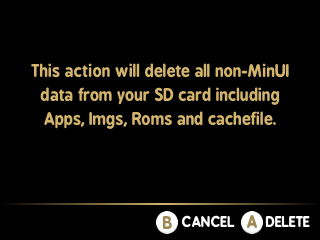
<style>
.page{position:relative;width:320px;height:240px;background:#000000}
.page>*{position:absolute;margin:0}
.t1{font:16px/24px "BPreplay-Bold";color:#d2b46c}
.t2{font:16px "BPreplay-Bold";color:#9f8952}
.t3{font:14px "BPreplay-Bold";color:#ffffff}
</style>
<div class="page">
<p class="t1" style="left:31px;top:63px;width:258px;height:66px;text-align:center">This action will delete all non-MinUI<br>data from your SD card including<br>Apps, Imgs, Roms and cachefile.</p>
<p class="t2" style="left:162px;top:216px;width:10px;height:13px">B</p>
<p class="t3" style="left:181px;top:215px;width:54px;height:13px">CANCEL</p>
<p class="t2" style="left:247px;top:215px;width:10px;height:13px">A</p>
<p class="t3" style="left:265px;top:216px;width:45px;height:11px">DELETE</p>
</div>
